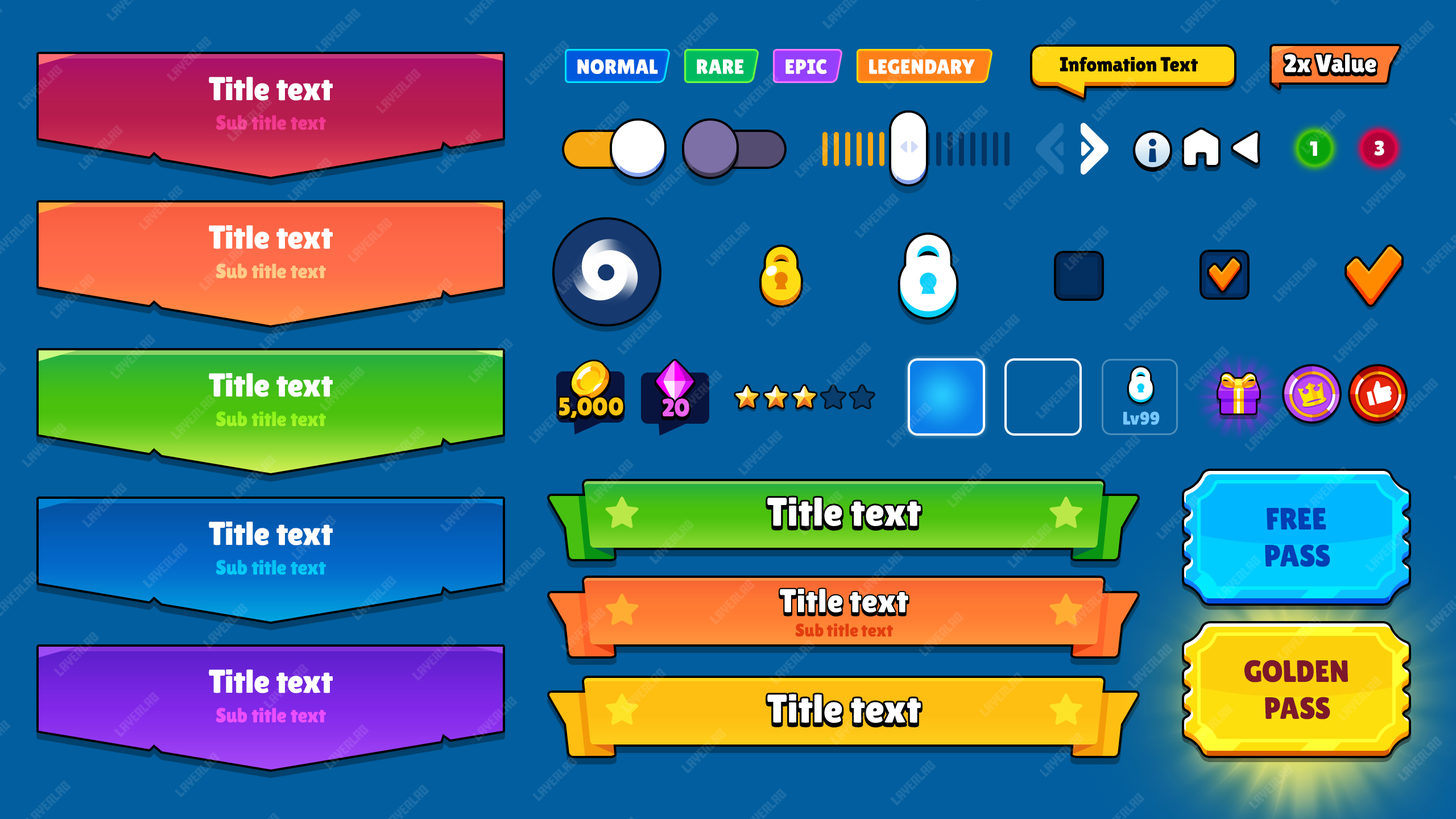
<style>
.page{position:relative;width:1456px;height:819px;background:#025e9e}
.page>*{position:absolute;margin:0}
.t1{font:20.5px "LilitaOne";color:#ffffff;text-transform:uppercase}
.t2{font:20.5px "LilitaOne";letter-spacing:-0.01em;color:#000000}
.t3{font:25px "LilitaOne";color:#ffffff}
.t4{font:33px "LilitaOne";color:#ffffff}
.t5{font:20.5px "LilitaOne";color:#f23a8f}
.t6{font:20.5px "LilitaOne";color:#ffcb85}
.t7{font:25px "LilitaOne";color:#ffc40e;text-transform:uppercase}
.t8{font:25px "LilitaOne";color:#ec5eec;text-transform:uppercase}
.t9{font:20.5px "LilitaOne";color:#9af421}
.t10{font:18.2px "LilitaOne";color:#76c7ff}
.t11{font:39.8px "LilitaOne";color:#ffffff}
.t12{font:30.9px "LilitaOne";color:#003fb4;text-transform:uppercase}
.t13{font:20.5px "LilitaOne";color:#05c5f5}
.t14{font:18.2px "LilitaOne";letter-spacing:-0.025em;color:#e43d0f}
.t15{font:30.9px "LilitaOne";color:#7c182a;text-transform:uppercase}
.t16{font:20.5px "LilitaOne";color:#ea4ffb}
</style>
<div class="page">
<p class="t1" style="left:577px;top:59px;width:81px;height:15px">Normal</p>
<p class="t1" style="left:697px;top:59px;width:47px;height:15px">Rare</p>
<p class="t1" style="left:785px;top:59px;width:42px;height:15px">Epic</p>
<p class="t1" style="left:869px;top:59px;width:106px;height:15px">Legendary</p>
<p class="t2" style="left:1060px;top:57px;width:138px;height:15px">Infomation Text</p>
<p class="t3" style="left:1285px;top:54px;width:91px;height:19px">2x Value</p>
<p class="t4" style="left:209px;top:77px;width:124px;height:24px">Title text</p>
<p class="t5" style="left:216px;top:115px;width:110px;height:15px">Sub title text</p>
<p class="t1" style="left:1310px;top:141px;width:7px;height:15px">1</p>
<p class="t1" style="left:1374px;top:140px;width:10px;height:16px">3</p>
<p class="t4" style="left:209px;top:225px;width:124px;height:24px">Title text</p>
<p class="t6" style="left:216px;top:263px;width:110px;height:16px">Sub title text</p>
<p class="t4" style="left:209px;top:373px;width:124px;height:24px">Title text</p>
<p class="t7" style="left:559px;top:397px;width:64px;height:21px">5,000</p>
<p class="t8" style="left:663px;top:398px;width:26px;height:19px">20</p>
<p class="t9" style="left:216px;top:411px;width:110px;height:16px">Sub title text</p>
<p class="t10" style="left:1123px;top:411px;width:37px;height:14px">Lv99</p>
<p class="t11" style="left:767px;top:497px;width:154px;height:29px">Title text</p>
<p class="t12" style="left:1265px;top:508px;width:65px;height:59px;text-align:center">Free<br>pass</p>
<p class="t4" style="left:209px;top:522px;width:124px;height:23px">Title text</p>
<p class="t13" style="left:216px;top:560px;width:110px;height:15px">Sub title text</p>
<p class="t4" style="left:780px;top:589px;width:128px;height:24px">Title text</p>
<p class="t14" style="left:795px;top:623px;width:98px;height:14px">Sub title text</p>
<p class="t15" style="left:1244px;top:660px;width:104px;height:59px;text-align:center">Golden<br>pass</p>
<p class="t4" style="left:209px;top:669px;width:124px;height:24px">Title text</p>
<p class="t11" style="left:767px;top:694px;width:154px;height:29px">Title text</p>
<p class="t16" style="left:216px;top:708px;width:110px;height:15px">Sub title text</p>
</div>
